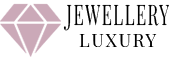
<style>
.page{position:relative;width:170px;height:60px;background:#ffffff}
.page>*{position:absolute;margin:0}
.t1{font:28.2px "PlayfairDisplay-Regular";letter-spacing:0.1em;color:#000000;text-transform:uppercase;scale:0.58 1}
.t2{font:18px "PlayfairDisplay-Regular";letter-spacing:0.1em;color:#000000;text-transform:uppercase}
</style>
<div class="page">
<p class="t1" style="left:63px;top:4px;width:106px;height:27px">JEWELLERY</p>
<p class="t2" style="left:79px;top:34px;width:78px;height:13px">LUXURY</p>
</div>
